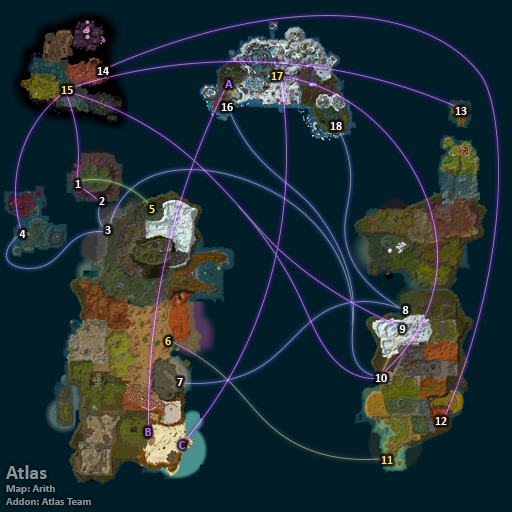
<style>
.page{position:relative;width:512px;height:512px;background:#001d28}
.page>*{position:absolute;margin:0}
.t1{font:12px "Calibri-Bold";color:#ffffff}
.t2{font:12px "Calibri-Bold";color:#fee570}
.t3{font:12px "Calibri-Bold";color:#bb66ff}
.t4{font:11px "Calibri-Bold";color:#8d9396}
.t5{font:20px "Calibri-Bold";color:#8d9396}
</style>
<div class="page">
<p class="t1" style="left:97px;top:67px;width:12px;height:8px">14</p>
<p class="t2" style="left:271px;top:72px;width:12px;height:8px">17</p>
<p class="t2" style="left:61px;top:86px;width:12px;height:8px">15</p>
<p class="t3" style="left:225px;top:80px;width:8px;height:8px">A</p>
<p class="t1" style="left:221px;top:103px;width:12px;height:8px">16</p>
<p class="t1" style="left:455px;top:107px;width:12px;height:8px">13</p>
<p class="t1" style="left:330px;top:122px;width:12px;height:8px">18</p>
<p class="t1" style="left:75px;top:180px;width:6px;height:8px">1</p>
<p class="t1" style="left:99px;top:197px;width:6px;height:8px">2</p>
<p class="t2" style="left:149px;top:205px;width:6px;height:8px">5</p>
<p class="t1" style="left:19px;top:230px;width:7px;height:8px">4</p>
<p class="t1" style="left:105px;top:226px;width:6px;height:8px">3</p>
<p class="t1" style="left:402px;top:306px;width:7px;height:8px">8</p>
<p class="t1" style="left:399px;top:325px;width:7px;height:8px">9</p>
<p class="t2" style="left:165px;top:337px;width:6px;height:8px">6</p>
<p class="t1" style="left:375px;top:374px;width:12px;height:8px">10</p>
<p class="t1" style="left:177px;top:378px;width:6px;height:8px">7</p>
<p class="t1" style="left:435px;top:417px;width:12px;height:8px">12</p>
<p class="t3" style="left:145px;top:428px;width:7px;height:8px">B</p>
<p class="t3" style="left:179px;top:441px;width:6px;height:8px">C</p>
<p class="t2" style="left:381px;top:456px;width:12px;height:8px">11</p>
<p class="t4" style="left:6px;top:465px;width:85px;height:40px"><span class="t5">Atlas<br></span>Map: Arith<br>Addon: Atlas Team</p>
</div>
